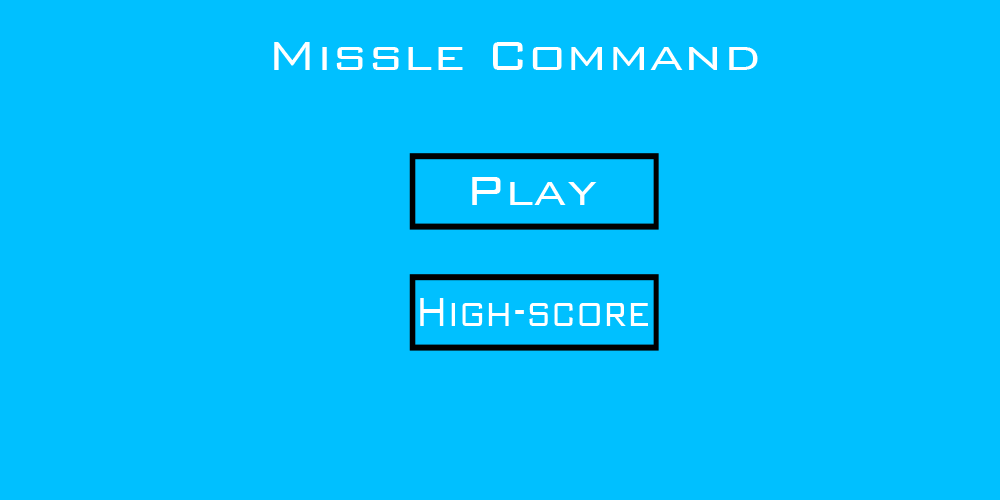
<style>
.page{position:relative;width:1000px;height:500px;background:#00c0ff}
.page>*{position:absolute;margin:0}
.t1{font:54px "BankGothicBT-Light";color:#ffffff;scale:1.03 1}
.t2{font:54px "BankGothicBT-Light";color:#ffffff}
.t3{font:54px "BankGothicBT-Light";color:#ffffff;scale:0.73 1}
</style>
<div class="page">
<p class="t1" style="left:274px;top:42px;width:484px;height:28px">Missle Command</p>
<p class="t2" style="left:472px;top:177px;width:125px;height:28px">Play</p>
<p class="t3" style="left:420px;top:298px;width:228px;height:28px">High-score</p>
</div>
